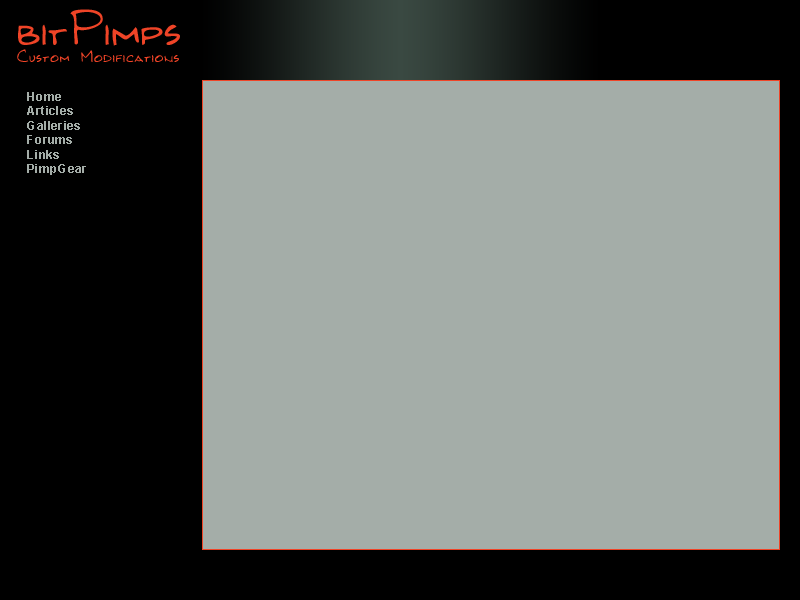
<style>
.page{position:relative;width:800px;height:600px;background:#a4ada8}
.page>*{position:absolute;margin:0}
.t1{font:52px "Kilroy-WasHere";color:#ef4427}
.t2{font:18px "Kilroy-WasHere";letter-spacing:0.035em;color:#ef4427}
.t3{font:12px "Arial-BoldMT";letter-spacing:0.035em;color:#a4ada8}
</style>
<div class="page">
<p class="t1" style="left:18px;top:9px;width:162px;height:37px">bitPimps</p>
<p class="t2" style="left:17px;top:49px;width:162px;height:14px">Custom Modifications</p>
<p class="t3" style="left:27px;top:92px;width:59px;height:83px">Home<br>Articles<br>Galleries<br>Forums<br>Links<br>PimpGear</p>
</div>
